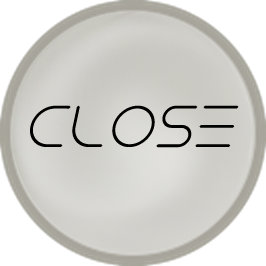
<style>
.page{position:relative;width:266px;height:266px}
.page>*{position:absolute;margin:0}
.t1{font:55px "NEONCLUBMUSIC-Italic";color:#010100}
</style>
<div class="page">
<p class="t1" style="left:30px;top:105px;width:209px;height:43px">Close</p>
</div>
